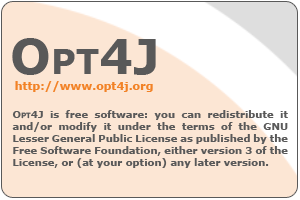
<style>
.page{position:relative;width:300px;height:200px;background:#fce6d4}
.page>*{position:absolute;margin:0}
.t1{font:48px "Verdana-Bold";color:#595959;font-variant:small-caps}
.t2{font:11px "Verdana-Bold";color:#f28226}
.t3{font:10px "Verdana-Bold";color:#595959}
.t4{font:10px "Verdana-Bold";color:#595959;font-variant:small-caps}
</style>
<div class="page">
<p class="t1" style="left:12px;top:38px;width:144px;height:37px">Opt4J</p>
<p class="t2" style="left:15px;top:81px;width:138px;height:11px">http://www.opt4j.org</p>
<p class="t3" style="left:12px;top:110px;width:276px;height:58px;text-align:justify"><span class="t4">Opt4J</span> is free software: you can redistribute it and/or modify it under the terms of the GNU Lesser General Public License as published by the Free Software Foundation, either version 3 of the License, or (at your option) any later version.</p>
</div>
